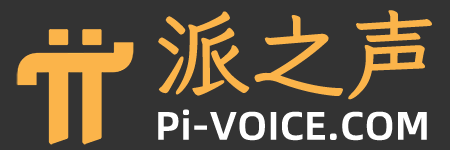
<style>
.page{position:relative;width:450px;height:150px;background:#333333}
.page>*{position:absolute;margin:0}
.t1{font:95.8px "LXGWWenKai-Bold";color:#fbb44a}
.t2{font:39.7px "AlibabaPuHuiTi_2_75_SemiBold";color:#ffffff}
</style>
<div class="page">
<p class="t1" style="left:158px;top:10px;width:274px;height:90px">派之声</p>
<p class="t2" style="left:158px;top:109px;width:269px;height:32px">Pi-VOICE.COM</p>
</div>
